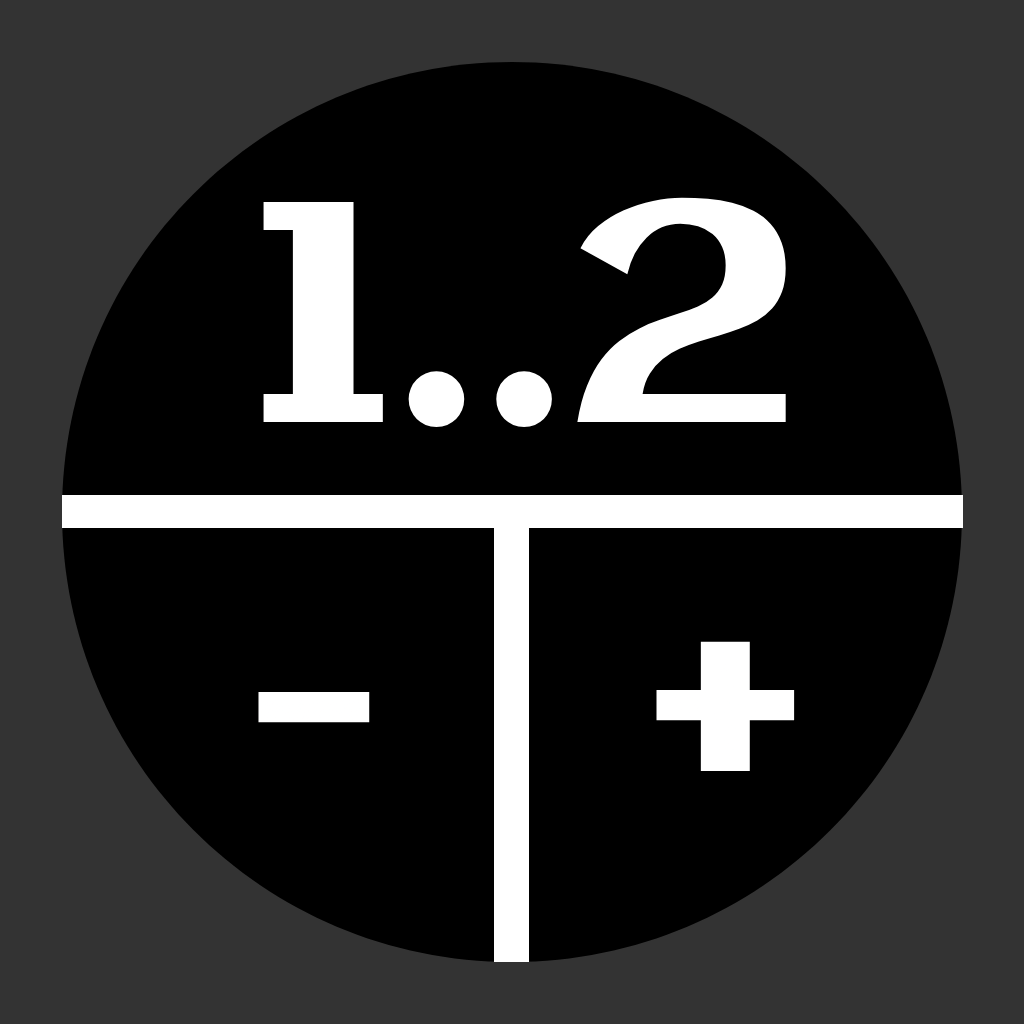
<style>
.page{position:relative;width:1024px;height:1024px;background:#000000}
.page>*{position:absolute;margin:0}
.t1{font:312.8px "Aclonica-Regular";color:#ffffff}
.t2{font:337.5px "Aclonica-Regular";color:#ffffff}
</style>
<div class="page">
<p class="t1" style="left:263px;top:197px;width:523px;height:230px">1..2</p>
<p class="t2" style="left:656px;top:641px;width:139px;height:130px">+</p>
<p class="t2" style="left:258px;top:692px;width:112px;height:31px">-</p>
</div>
